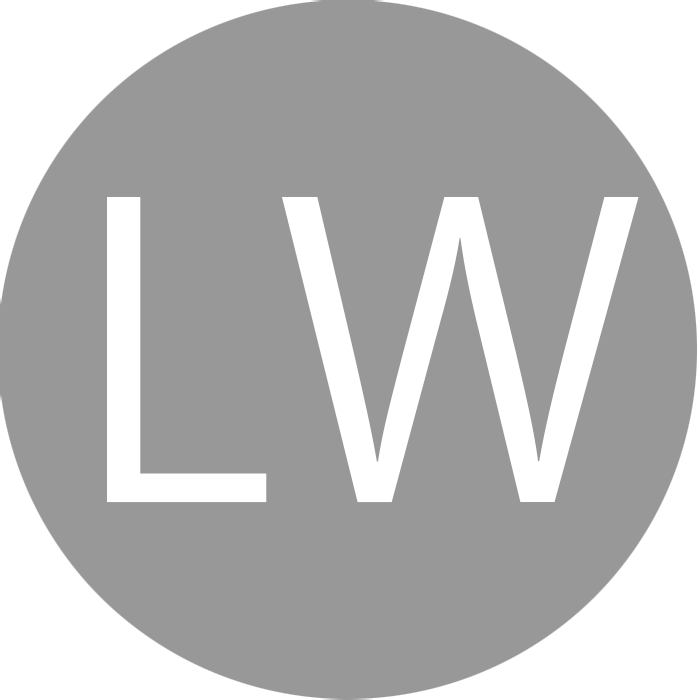
<style>
.page{position:relative;width:700px;height:700px;background:#989898}
.page>*{position:absolute;margin:0}
.t1{font:400px "KozGoPr6N-Regular";color:#ffffff}
</style>
<div class="page">
<p class="t1" style="left:107px;top:197px;width:532px;height:306px">LW</p>
</div>
